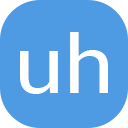
<style>
.page{position:relative;width:128px;height:128px;background:#4e9be4}
.page>*{position:absolute;margin:0}
.t1{font:80px "Roboto-Regular";color:#ffffff;scale:1.1 1}
</style>
<div class="page">
<p class="t1" style="left:20px;top:32px;width:88px;height:62px">uh</p>
</div>
